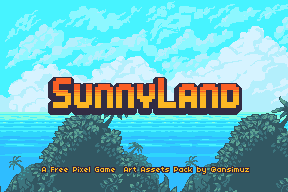
<style>
.page{position:relative;width:288px;height:192px;background:#47f3ff}
.page>*{position:absolute;margin:0}
.t1{font:8.1px "04b03";color:#fcb824}
</style>
<div class="page">
<p class="t1" style="left:42px;top:167px;width:207px;height:7px">A Free Pixel Game  Art Assets Pack by @ansimuz</p>
</div>
